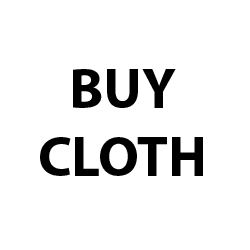
<style>
.page{position:relative;width:250px;height:250px;background:#ffffff}
.page>*{position:absolute;margin:0}
.t1{font:56.7px "MyriadPro-Bold";color:#000000}
</style>
<div class="page">
<p class="t1" style="left:40px;top:69px;width:163px;height:107px;text-align:center">BUY<br>CLOTH</p>
</div>
